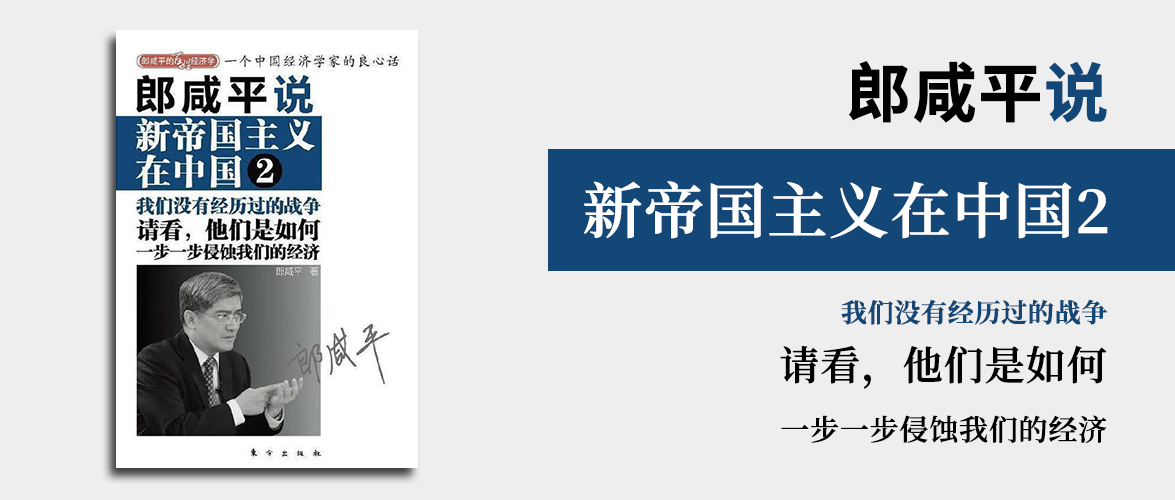
<style>
.page{position:relative;width:1175px;height:500px;background:#eeeeee}
.page>*{position:absolute;margin:0}
.t1{font:64px "SourceHanSansSC-Bold";color:#000000;font-weight:bold}
.t2{font:64px "SourceHanSansSC-Bold";color:#134777;font-weight:bold}
.t3{font:60px "SourceHanSerifSC-SemiBold";color:#ffffff;font-weight:bold}
.t4{font:29px "SourceHanSerifSC-SemiBold";color:#000000;font-weight:bold}
.t5{font:26px "SourceHanSerifSC-Bold";color:#134777;font-weight:bold}
.t6{font:40px "SourceHanSerifSC-SemiBold";color:#000000;font-weight:bold}
</style>
<div class="page">
<p class="t1" style="left:849px;top:61px;width:258px;height:62px">郎咸平<span class="t2">说</span></p>
<p class="t3" style="left:584px;top:181px;width:524px;height:58px">新帝国主义在中国2</p>
<p class="t4" style="left:780px;top:299px;width:328px;height:144px;text-align:right"><span class="t5">我们没有经历过的战争<br></span><span class="t6">请看，他们是如何<br></span>一步一步侵蚀我们的经济</p>
</div>
